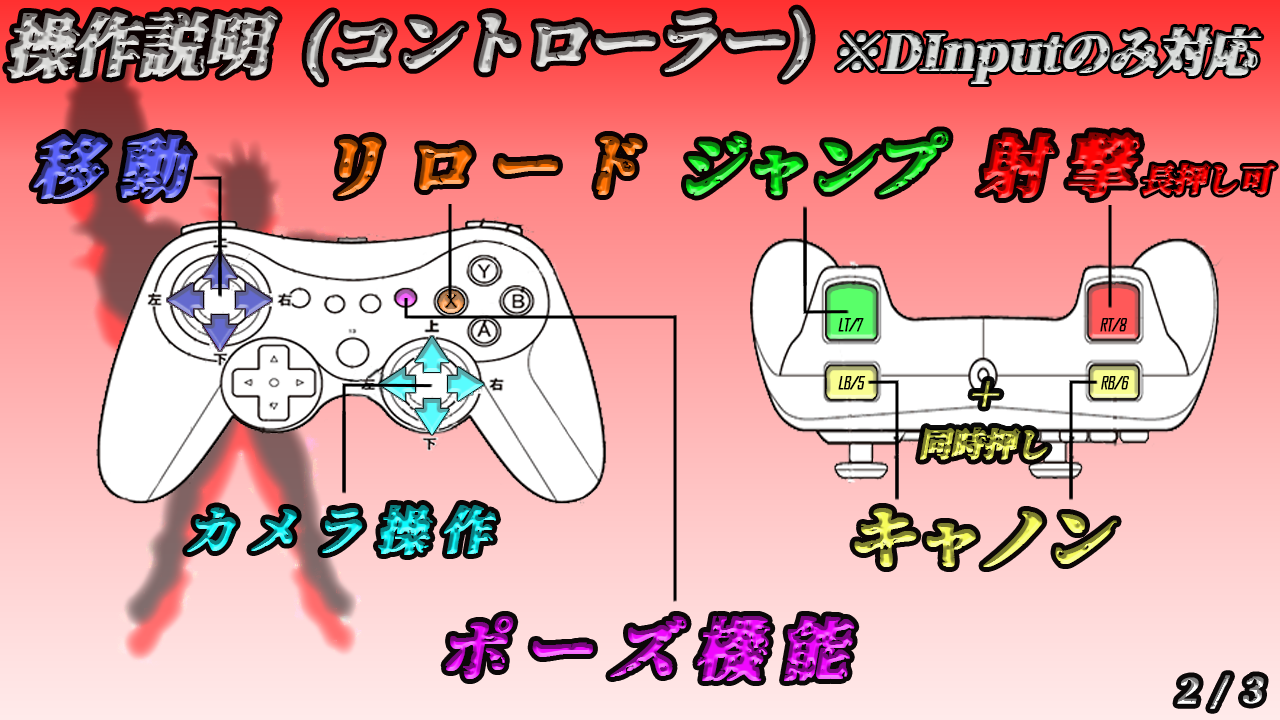
<style>
.page{position:relative;width:1280px;height:720px}
.page>*{position:absolute;margin:0}
.t1{font:66.7px "Genkaimincho";letter-spacing:-0.05em;font-weight:bold;font-style:italic}
.t2{font:50px "Genkaimincho";letter-spacing:-0.05em;color:#d8dbd9;font-weight:bold;font-style:italic}
.t3{font:66.7px "Genkaimincho";letter-spacing:0.25em;font-weight:bold;font-style:italic}
.t4{font:33.3px "Genkaimincho";letter-spacing:-0.05em;font-weight:bold;font-style:italic}
.t5{font:16.7px "AgencyFB-Reg";letter-spacing:-0.05em;color:#000000;font-weight:bold;font-style:italic}
.t6{font:33.3px/50px "Genkaimincho";letter-spacing:-0.05em;font-weight:bold;font-style:italic}
.t7{font:50px "Genkaimincho";letter-spacing:0.25em;font-weight:bold;font-style:italic}
</style>
<div class="page">
<p class="t1" style="left:7px;top:9px;width:804px;height:74px">操作説明 (コントローラー)</p>
<p class="t2" style="left:837px;top:27px;width:425px;height:57px">※DInputのみ対応</p>
<p class="t3" style="left:33px;top:133px;width:160px;height:66px">移動</p>
<p class="t3" style="left:337px;top:136px;width:306px;height:60px">リロード</p>
<p class="t1" style="left:686px;top:131px;width:263px;height:65px">ジャンプ</p>
<p class="t3" style="left:979px;top:132px;width:161px;height:66px">射撃</p>
<p class="t4" style="left:1142px;top:163px;width:134px;height:33px">長押し可</p>
<p class="t5" style="left:838px;top:318px;width:26px;height:14px">LT/7</p>
<p class="t5" style="left:1100px;top:318px;width:28px;height:14px">RT/8</p>
<p class="t5" style="left:838px;top:376px;width:28px;height:14px">LB/5</p>
<p class="t5" style="left:1101px;top:376px;width:28px;height:14px">RB/6</p>
<p class="t6" style="left:920px;top:381px;width:128px;height:79px;text-align:center">＋<br>同時押し</p>
<p class="t7" style="left:187px;top:505px;width:309px;height:50px">カメラ操作</p>
<p class="t3" style="left:445px;top:616px;width:410px;height:65px">ポーズ機能</p>
</div>
